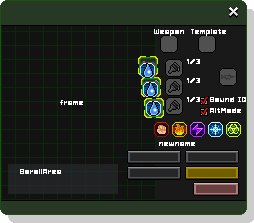
<style>
.page{position:relative;width:254px;height:223px;background:#121212}
.page>*{position:absolute;margin:0}
.t1{font:8px "Hobo";color:#ffffff}
</style>
<div class="page">
<p class="t1" style="left:154px;top:29px;width:30px;height:7px">Weapon</p>
<p class="t1" style="left:191px;top:29px;width:35px;height:7px">Template</p>
<p class="t1" style="left:187px;top:59px;width:13px;height:5px">1/3</p>
<p class="t1" style="left:187px;top:78px;width:13px;height:5px">1/3</p>
<p class="t1" style="left:60px;top:100px;width:23px;height:5px">frame</p>
<p class="t1" style="left:187px;top:97px;width:13px;height:5px">1/3</p>
<p class="t1" style="left:210px;top:97px;width:36px;height:5px">Sound ID</p>
<p class="t1" style="left:210px;top:108px;width:31px;height:5px">AltMode</p>
<p class="t1" style="left:159px;top:142px;width:36px;height:4px">newname</p>
</div>
